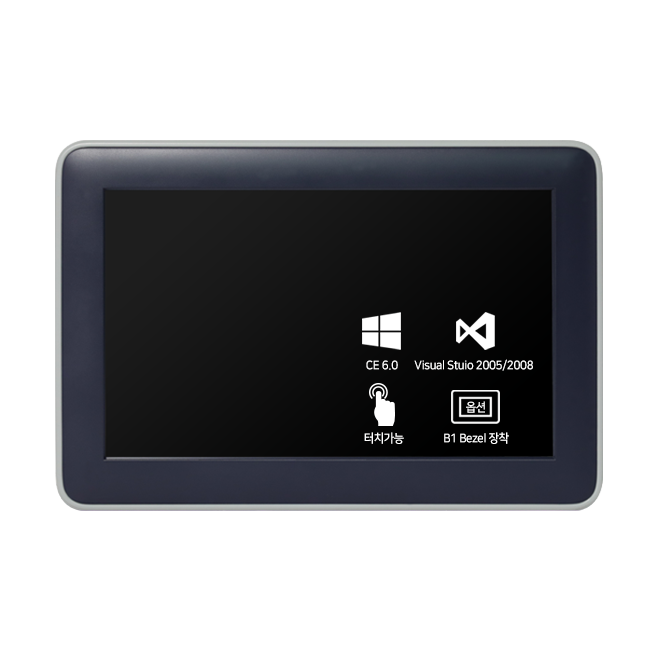
<style>
.page{position:relative;width:650px;height:650px;background:#ffffff}
.page>*{position:absolute;margin:0}
.t1{font:12px "NanumSquareB";letter-spacing:-0.03em;color:#ffffff;scale:0.95 1}
</style>
<div class="page">
<p class="t1" style="left:366px;top:360px;width:32px;height:10px">CE 6.0</p>
<p class="t1" style="left:414px;top:359px;width:119px;height:12px">Visual Stuio 2005/2008</p>
<p class="t1" style="left:466px;top:401px;width:19px;height:12px">옵션</p>
<p class="t1" style="left:364px;top:432px;width:40px;height:12px">터치가능</p>
<p class="t1" style="left:444px;top:432px;width:65px;height:12px">B1 Bezel 장착</p>
</div>
